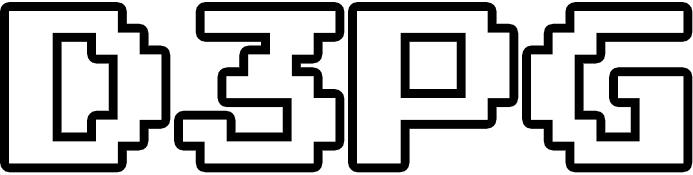
<style>
.page{position:relative;width:693px;height:175px;background:#ffffff}
.page>*{position:absolute;margin:0}
.t1{font:174.2px "PressStart2P";color:#ffffff}
</style>
<div class="page">
<p class="t1" style="left:9px;top:11px;width:675px;height:153px">D3PG</p>
</div>
